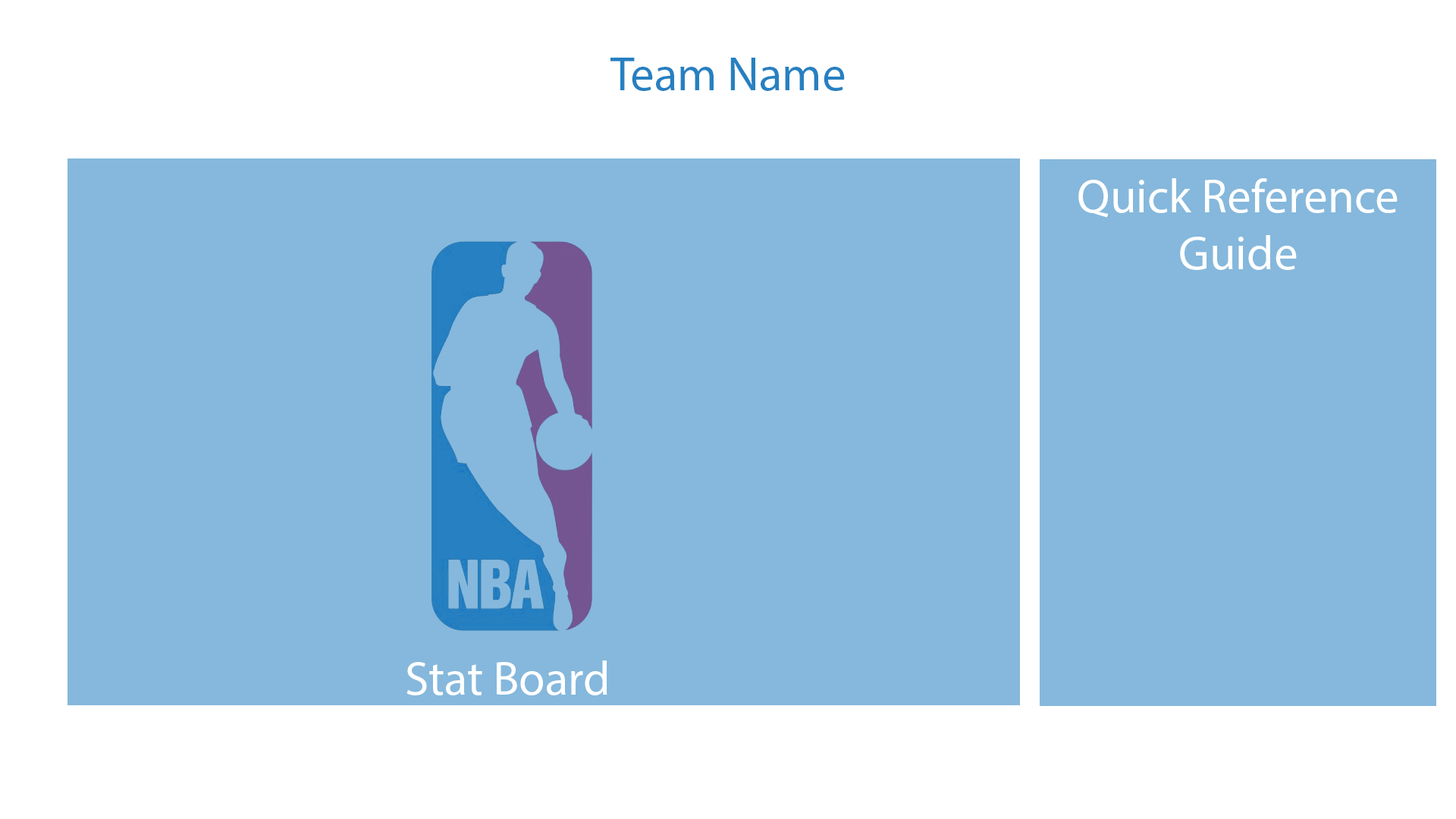
<style>
.page{position:relative;width:1456px;height:819px;background:#85b8dc}
.page>*{position:absolute;margin:0}
.t1{font:47.8px "MyriadPro-Regular";color:#2680c1}
.t2{font:47.8px "MyriadPro-Regular";color:#ffffff}
</style>
<div class="page">
<p class="t1" style="left:610px;top:58px;width:235px;height:33px">Team Name</p>
<p class="t2" style="left:1078px;top:178px;width:320px;height:92px;text-align:center">Quick Reference Guide</p>
<p class="t2" style="left:406px;top:660px;width:201px;height:35px">Stat Board</p>
</div>
